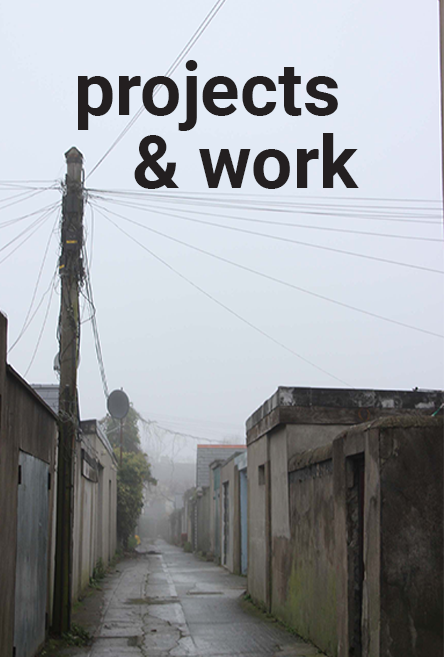
<style>
.page{position:relative;width:444px;height:657px}
.page>*{position:absolute;margin:0}
.t1{font:72.9px/72.9px "Roboto-Bold";color:#231f20}
</style>
<div class="page">
<p class="t1" style="left:78px;top:60px;width:281px;height:129px;text-align:right">projects <br>&amp; work</p>
</div>
